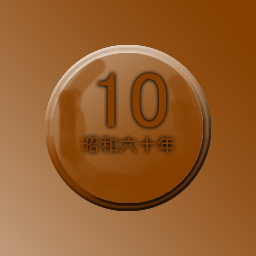
<style>
.page{position:relative;width:256px;height:256px}
.page>*{position:absolute;margin:0}
.t1{font:79.3px "MS-PGothic";color:#843e00}
.t2{font:18.9px "MS-PGothic";color:#843e00}
</style>
<div class="page">
<p class="t1" style="left:98px;top:73px;width:69px;height:55px">10</p>
<p class="t2" style="left:82px;top:136px;width:93px;height:18px">昭和六十年</p>
</div>
